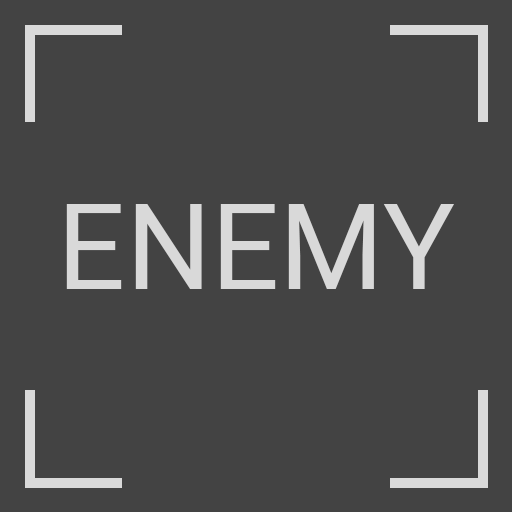
<style>
.page{position:relative;width:512px;height:512px;background:#434343}
.page>*{position:absolute;margin:0}
.t1{font:120px "Roboto-Regular";color:#d9d9d9}
</style>
<div class="page">
<p class="t1" style="left:66px;top:204px;width:388px;height:85px">ENEMY</p>
</div>
